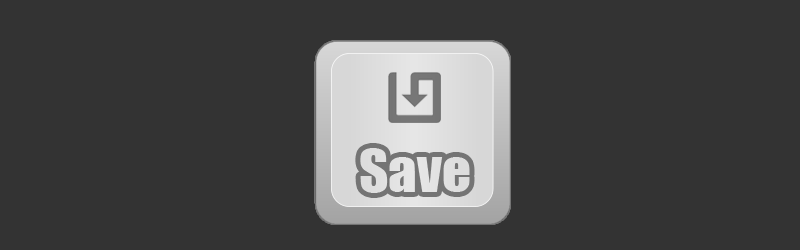
<style>
.page{position:relative;width:800px;height:250px;background:#333333}
.page>*{position:absolute;margin:0}
.t1{font:53.6px "Impact";color:#e8e8e8;scale:1.06 1}
</style>
<div class="page">
<p class="t1" style="left:360px;top:148px;width:110px;height:45px">Save</p>
</div>
